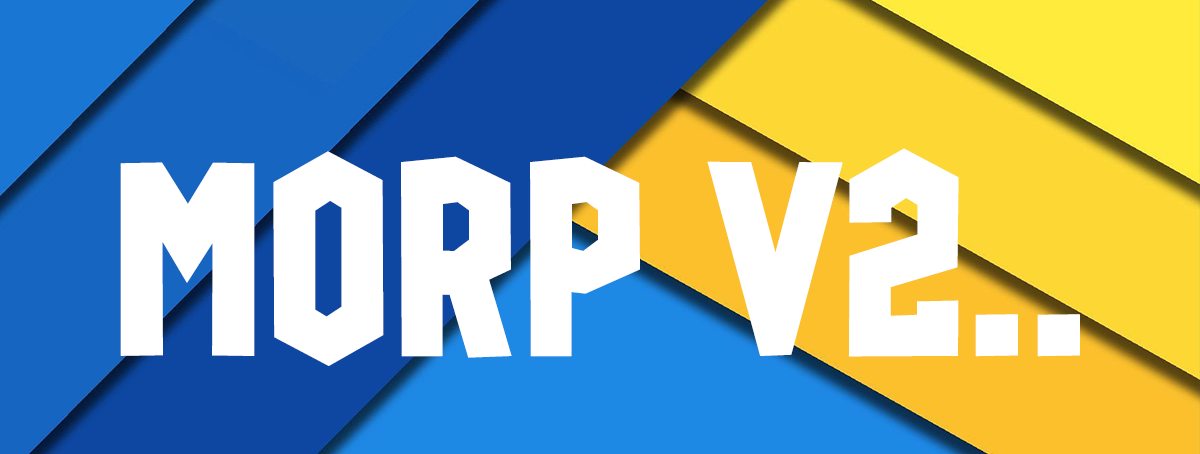
<style>
.page{position:relative;width:1200px;height:454px;background:#ffffff}
.page>*{position:absolute;margin:0}
.t1{font:274.1px "GlueGun";color:#ffffff;font-weight:bold}
</style>
<div class="page">
<p class="t1" style="left:120px;top:148px;width:960px;height:218px">MORP V2..</p>
</div>
